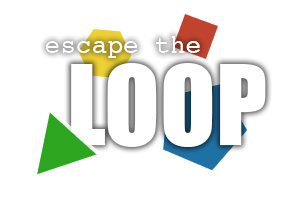
<style>
.page{position:relative;width:300px;height:200px;background:#ffffff}
.page>*{position:absolute;margin:0}
.t1{font:26.1px "Courier";color:#ffffff}
.t2{font:102.4px "Impact";color:#ffffff}
</style>
<div class="page">
<p class="t1" style="left:45px;top:36px;width:155px;height:22px">escape the</p>
<p class="t1" style="left:45px;top:36px;width:155px;height:22px">escape the</p>
<p class="t2" style="left:71px;top:63px;width:195px;height:84px">LOOP</p>
<p class="t2" style="left:71px;top:63px;width:195px;height:84px">LOOP</p>
</div>
